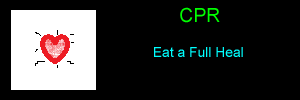
<style>
.page{position:relative;width:300px;height:100px;background:#000000}
.page>*{position:absolute;margin:0}
.t1{font:19.4px "ArialMT";color:#00ff00}
.t2{font:13.9px "ArialMT";color:#00ffff}
</style>
<div class="page">
<p class="t1" style="left:180px;top:7px;width:40px;height:16px">CPR</p>
<p class="t2" style="left:154px;top:47px;width:89px;height:10px">Eat a Full Heal</p>
</div>
